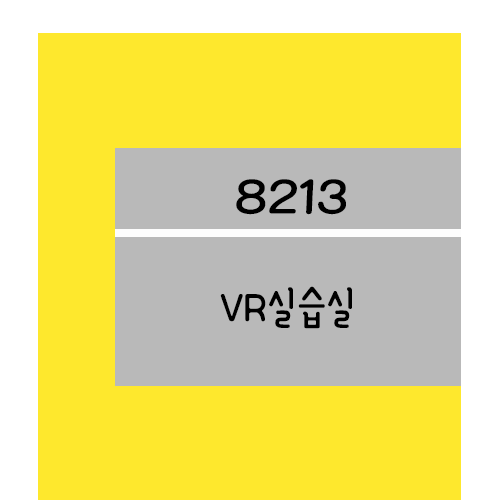
<style>
.page{position:relative;width:500px;height:500px;background:#fee82d}
.page>*{position:absolute;margin:0}
.t1{font:61.2px "YanoljaYacheR";color:#000000;scale:1.18 1}
.t2{font:48px "YanoljaYacheR";color:#000000}
</style>
<div class="page">
<p class="t1" style="left:236px;top:179px;width:110px;height:36px">8213</p>
<p class="t2" style="left:220px;top:286px;width:132px;height:43px">VR실습실</p>
</div>
